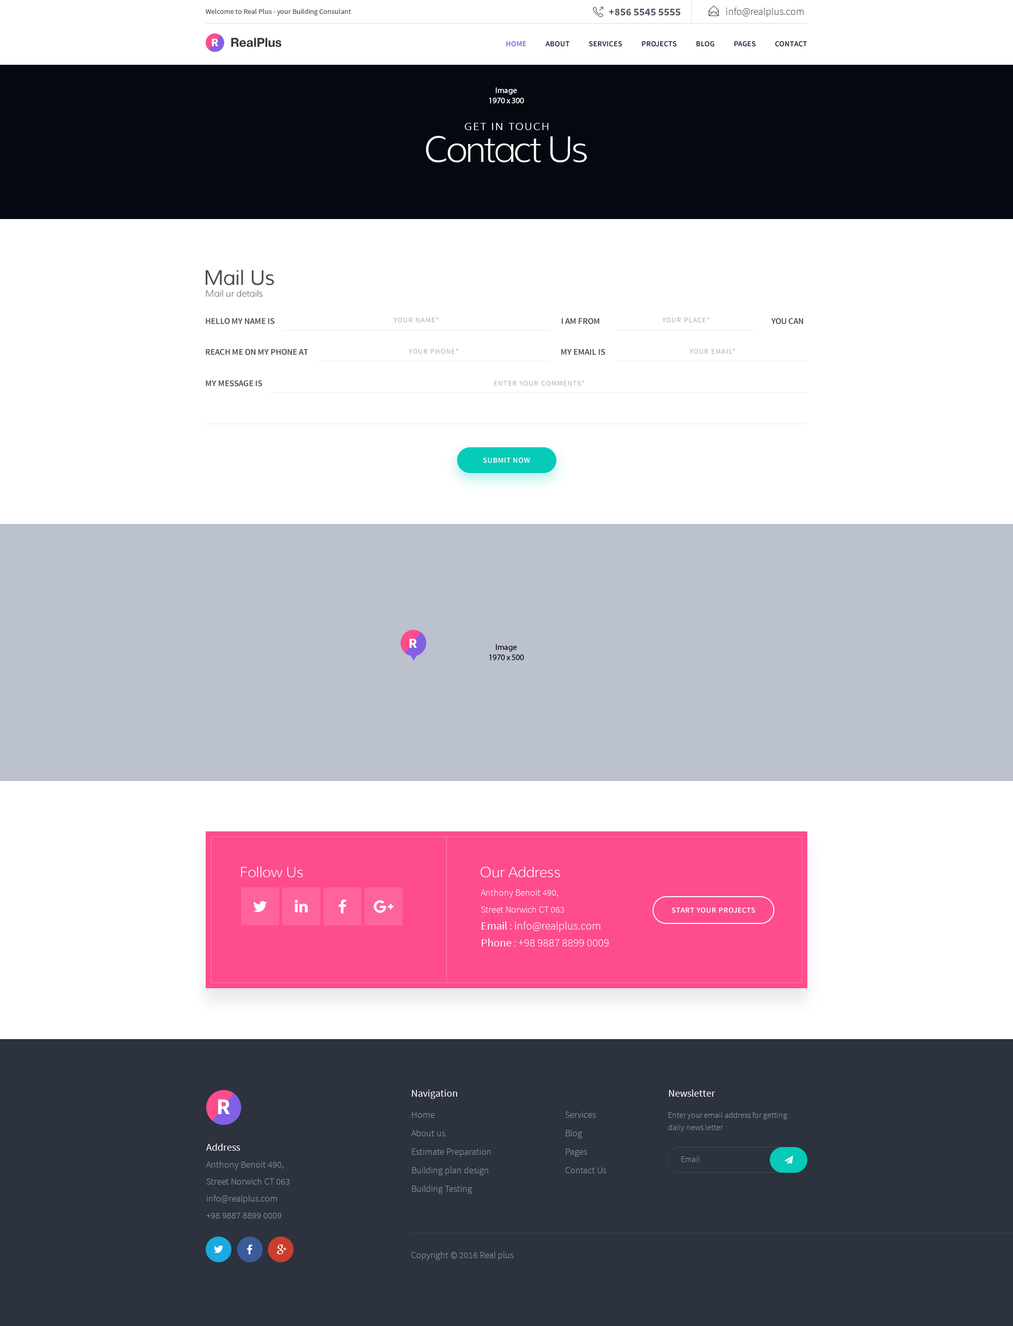
<style>
.page{position:relative;width:1013px;height:1326px;background:#ffffff}
.page>*{position:absolute;margin:0}
.t1{font:7.2px "SourceSansPro-Regular";color:#52555f}
.t2{font:10.3px "SourceSansPro-Bold";color:#52555f;text-transform:uppercase}
.t3{font:10.3px "SourceSansPro-Light";color:#52555f}
.t4{font:11.8px "SourceSansPro-Bold";letter-spacing:-0.06em;color:#ffffff}
.t5{font:12.3px "HelveticaNeue-Bold";color:#35373e}
.t6{font:7.7px "SourceSansPro-Semibold";letter-spacing:0.025em;color:#21243b;text-transform:uppercase}
.t7{font:7.7px "SourceSansPro-Semibold";letter-spacing:0.025em;color:#8260e3;text-transform:uppercase}
.t8{font:8.2px "MyriadPro-Regular";color:#ffffff}
.t9{font:10.3px "Muli";letter-spacing:0.1em;color:#ffffff;text-transform:uppercase}
.t10{font:36px "Muli-Light";letter-spacing:-0.075em;color:#ffffff}
.t11{font:20.6px "Muli";letter-spacing:-0.025em;color:#464d50}
.t12{font:9.3px "Muli";letter-spacing:-0.025em;color:#848d91}
.t13{font:8.7px "SourceSansPro-Semibold";color:#464d50;text-transform:uppercase}
.t14{font:7.2px "SourceSansPro-Regular";letter-spacing:0.1em;color:#a6adb9;text-transform:uppercase}
.t15{font:7.7px "SourceSansPro-Semibold";letter-spacing:0.05em;color:#ffffff;text-transform:uppercase}
.t16{font:13.9px "SourceSansPro-Bold";letter-spacing:-0.06em;color:#ffffff}
.t17{font:8.2px "MyriadPro-Regular";color:#000000}
.t18{font:14.4px "Muli-Light";letter-spacing:-0.025em;color:#ffffff}
.t19{font:9.3px/17px "SourceSansPro-Light";color:#ffffff}
.t20{font:11.3px/17px "SourceSansPro-Regular";color:#ffffff}
.t21{font:11.3px/17px "SourceSansPro-Light";color:#ffffff}
.t22{font:10.3px "SourceSansPro-Regular";color:#ffffff}
.t23{font:22.3px "SourceSansPro-Bold";letter-spacing:-0.06em;color:#ffffff}
.t24{font:9.3px/18.5px "SourceSansPro-Light";color:#8f97a6}
.t25{font:8.2px/12.3px "SourceSansPro-Light";color:#8f97a6}
.t26{font:9.3px/17px "SourceSansPro-Light";color:#8f97a6}
.t27{font:10.3px/17px "SourceSansPro-Regular";color:#ffffff}
.t28{font:8.2px "SourceSansPro-Light";color:#8f97a6}
.t29{font:9.3px "SourceSansPro-Light";color:#8f97a6}
</style>
<div class="page">
<p class="t1" style="left:206px;top:9px;width:145px;height:6px">Welcome to Real Plus - your Building Consulant</p>
<p class="t2" style="left:609px;top:9px;width:71px;height:6px">+856 5545 5555</p>
<p class="t3" style="left:726px;top:8px;width:78px;height:9px">info@realplus.com</p>
<p class="t4" style="left:212px;top:39px;width:7px;height:7px">R</p>
<p class="t5" style="left:231px;top:38px;width:50px;height:9px">RealPlus</p>
<p class="t6" style="left:506px;top:41px;width:301px;height:6px"><span class="t7">Home        </span>   About           Services           PROJECTS           Blog           Pages           Contact</p>
<p class="t8" style="left:489px;top:87px;width:35px;height:16px;text-align:center">Image<br>1970 x 300</p>
<p class="t9" style="left:465px;top:123px;width:84px;height:7px">Get in touch</p>
<p class="t10" style="left:426px;top:136px;width:161px;height:27px">Contact Us</p>
<p class="t11" style="left:206px;top:269px;width:68px;height:16px">Mail Us</p>
<p class="t12" style="left:206px;top:290px;width:57px;height:7px">Mail ur details</p>
<p class="t13" style="left:206px;top:318px;width:69px;height:7px">Hello My name is</p>
<p class="t14" style="left:394px;top:317px;width:45px;height:6px">Your Name*</p>
<p class="t13" style="left:562px;top:318px;width:38px;height:7px">I am from</p>
<p class="t14" style="left:662px;top:317px;width:47px;height:6px">Your Place*</p>
<p class="t13" style="left:771px;top:318px;width:32px;height:7px">You can</p>
<p class="t13" style="left:206px;top:349px;width:102px;height:6px">reach me on my phone at</p>
<p class="t14" style="left:409px;top:349px;width:49px;height:5px">Your Phone*</p>
<p class="t13" style="left:561px;top:349px;width:44px;height:6px">My email is</p>
<p class="t14" style="left:690px;top:349px;width:45px;height:5px">Your Email*</p>
<p class="t13" style="left:206px;top:380px;width:56px;height:7px">My message is</p>
<p class="t14" style="left:494px;top:381px;width:90px;height:5px">Enter your comments*</p>
<p class="t15" style="left:483px;top:458px;width:47px;height:5px">Submit now</p>
<p class="t16" style="left:409px;top:639px;width:8px;height:9px">R</p>
<p class="t17" style="left:489px;top:644px;width:35px;height:16px;text-align:center">Image<br>1970 x 500</p>
<p class="t18" style="left:241px;top:867px;width:62px;height:11px">Follow Us</p>
<p class="t18" style="left:480px;top:867px;width:81px;height:11px">Our Address</p>
<p class="t19" style="left:481px;top:889px;width:128px;height:58px">Anthony Benoit 490, <br>Street Norwich CT 063<br><span class="t20">Email</span><span class="t21"> : info@realplus.com<br></span><span class="t20">Phone</span><span class="t21"> : +98 9887 8899 0009</span></p>
<p class="t15" style="left:672px;top:908px;width:83px;height:5px">Start your projects</p>
<p class="t22" style="left:412px;top:1090px;width:45px;height:9px">Navigation</p>
<p class="t22" style="left:669px;top:1090px;width:46px;height:7px">Newsletter</p>
<p class="t23" style="left:218px;top:1100px;width:12px;height:14px">R</p>
<p class="t24" style="left:411px;top:1112px;width:80px;height:82px">Home         <br>About us         <br>Estimate Preparation<br>Building plan design <br>Building Testing</p>
<p class="t24" style="left:565px;top:1112px;width:41px;height:62px">Services<br>Blog         <br>Pages         <br>Contact Us</p>
<p class="t25" style="left:668px;top:1112px;width:119px;height:20px">Enter your email address for getting<br>daily news letter</p>
<p class="t26" style="left:206px;top:1144px;width:84px;height:75px"><span class="t27">Address<br></span>Anthony Benoit 490, <br>Street Norwich CT 063<br>info@realplus.com<br>+98 9887 8899 0009</p>
<p class="t28" style="left:681px;top:1157px;width:18px;height:5px">Email</p>
<p class="t29" style="left:411px;top:1252px;width:103px;height:9px">Copyright © 2016 Real plus</p>
</div>
